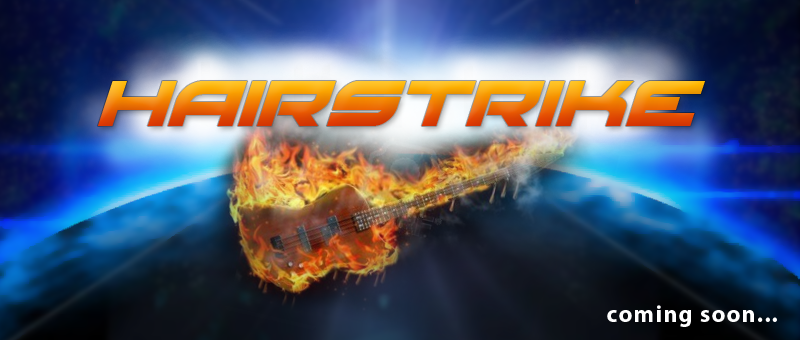
<style>
.page{position:relative;width:800px;height:340px}
.page>*{position:absolute;margin:0}
.t1{font:96px "RedRocketItalic"}
.t2{font:24px "MyriadPro-Bold";letter-spacing:0.05em;color:#ffffff}
</style>
<div class="page">
<p class="t1" style="left:97px;top:81px;width:609px;height:45px">hairstrike</p>
<p class="t2" style="left:607px;top:305px;width:170px;height:22px">coming soon...</p>
</div>
